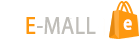
<style>
.page{position:relative;width:139px;height:39px;background:#ffffff}
.page>*{position:absolute;margin:0}
.t1{font:34.5px "MyriadArabic-Regular";color:#c0beb9;font-weight:bold;scale:0.87 1}
.t2{font:34.5px "MyriadArabic-Regular";color:#fe980f;font-weight:bold;scale:0.87 1}
.t3{font:27px "MyriadArabic-Regular";color:#ffffff;font-weight:bold;scale:0.87 1}
</style>
<div class="page">
<p class="t1" style="left:26px;top:17px;width:70px;height:17px"><span class="t2">E</span>-MALL</p>
<p class="t3" style="left:123px;top:19px;width:9px;height:11px">e</p>
</div>
